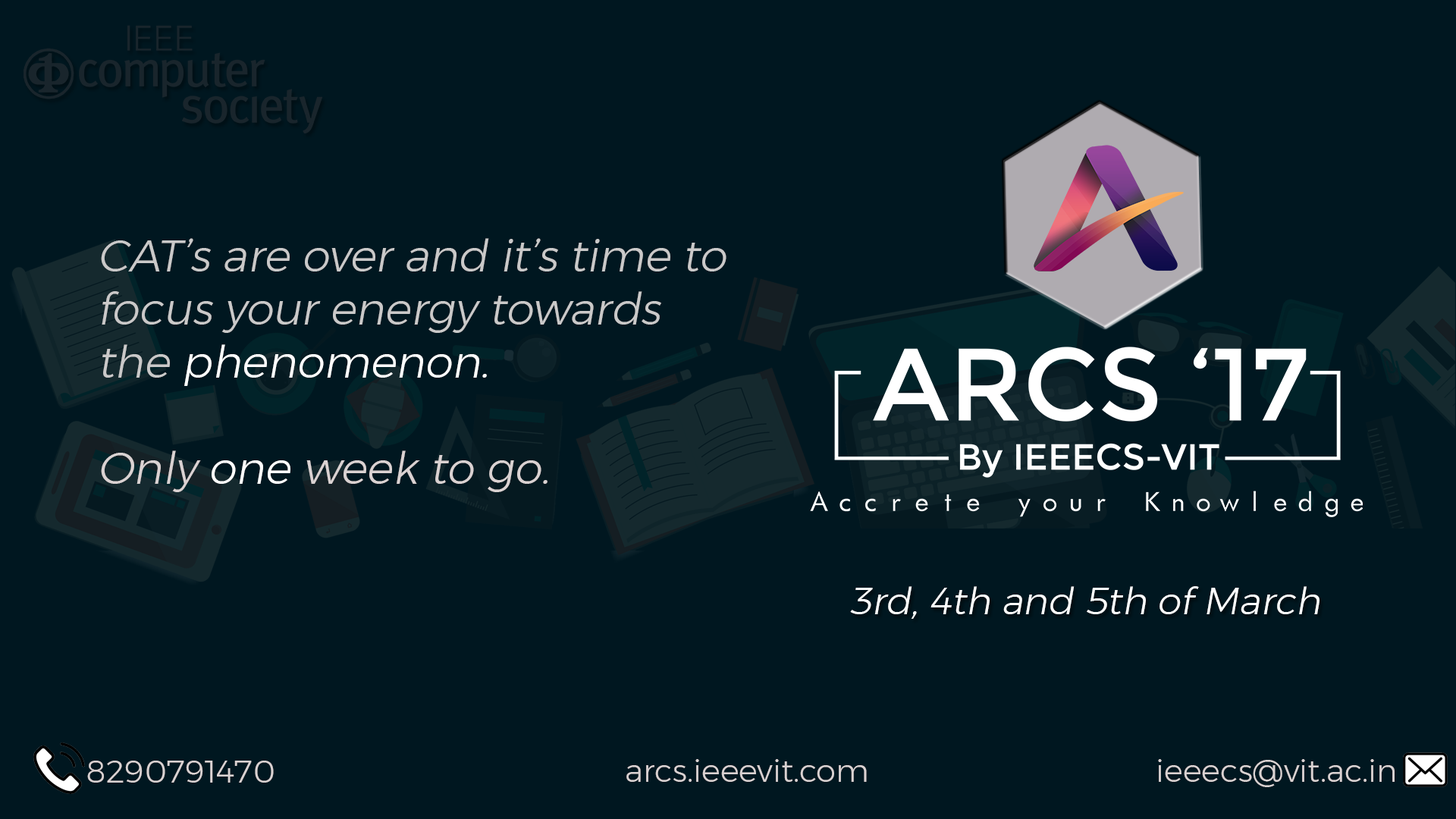
<style>
.page{position:relative;width:1456px;height:819px;background:#001720}
.page>*{position:absolute;margin:0}
.t1{font:44.2px "Montserrat-Light";color:#cac9c9;font-style:italic}
.t2{font:44.2px "Montserrat-Light";color:#ffffff;font-style:italic}
.t3{font:44.2px "Montserrat-Light";color:#dad2d2;font-style:italic}
.t4{font:38px "Montserrat-Light";color:#ffffff;font-style:italic}
.t5{font:31.8px "Montserrat-Light";color:#dad2d2}
.t6{font:31.6px "Montserrat-Light";color:#dad2d2}
</style>
<div class="page">
<p class="t1" style="left:101px;top:238px;width:625px;height:254px">CAT’s are over and it’s time to focus your energy towards         the <span class="t2">phenomenon.<br></span><span class="t3"><br>Only </span><span class="t2">one</span><span class="t3"> week to go.</span></p>
<p class="t4" style="left:850px;top:586px;width:469px;height:33px">3rd, 4th and 5th of March</p>
<p class="t5" style="left:87px;top:761px;width:187px;height:22px">8290791470</p>
<p class="t6" style="left:626px;top:759px;width:241px;height:23px">arcs.ieeevit.com</p>
<p class="t6" style="left:1158px;top:759px;width:237px;height:28px">ieeecs@vit.ac.in</p>
</div>
